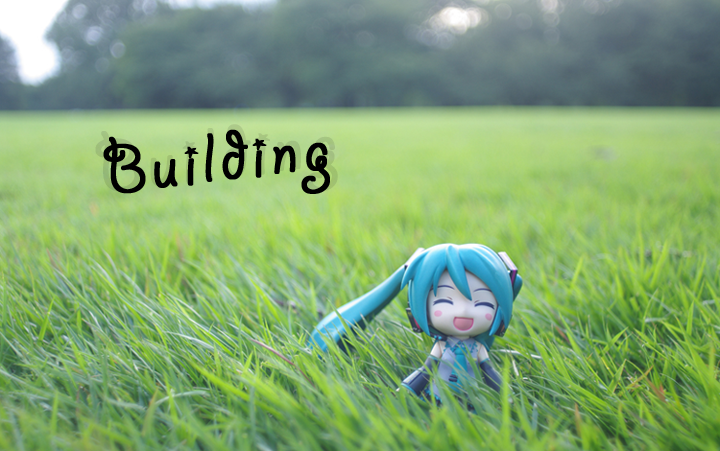
<style>
.page{position:relative;width:720px;height:451px}
.page>*{position:absolute;margin:0}
.t1{font:80.5px "GiddyupStd";letter-spacing:0.06em;font-weight:bold}
.t2{font:75.3px "GiddyupStd";letter-spacing:0.06em;color:#000000;font-weight:bold}
</style>
<div class="page">
<p class="t1" style="left:95px;top:124px;width:243px;height:68px;rotate:-7deg">Building</p>
<p class="t2" style="left:103px;top:129px;width:227px;height:65px;rotate:-7deg">Building</p>
</div>
